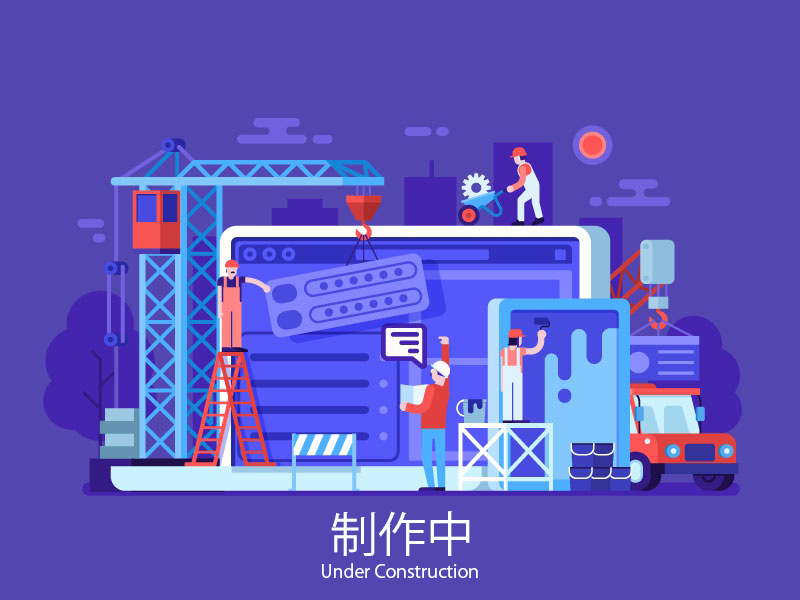
<style>
.page{position:relative;width:800px;height:600px;background:#5346b0}
.page>*{position:absolute;margin:0}
.t1{font:48px "KozGoPr6N-Regular";color:#ffffff}
.t2{font:18px "KozGoPr6N-Regular";color:#ffffff}
</style>
<div class="page">
<p class="t1" style="left:331px;top:511px;width:139px;height:45px">制作中</p>
<p class="t2" style="left:322px;top:563px;width:156px;height:15px">Under Construction</p>
</div>
